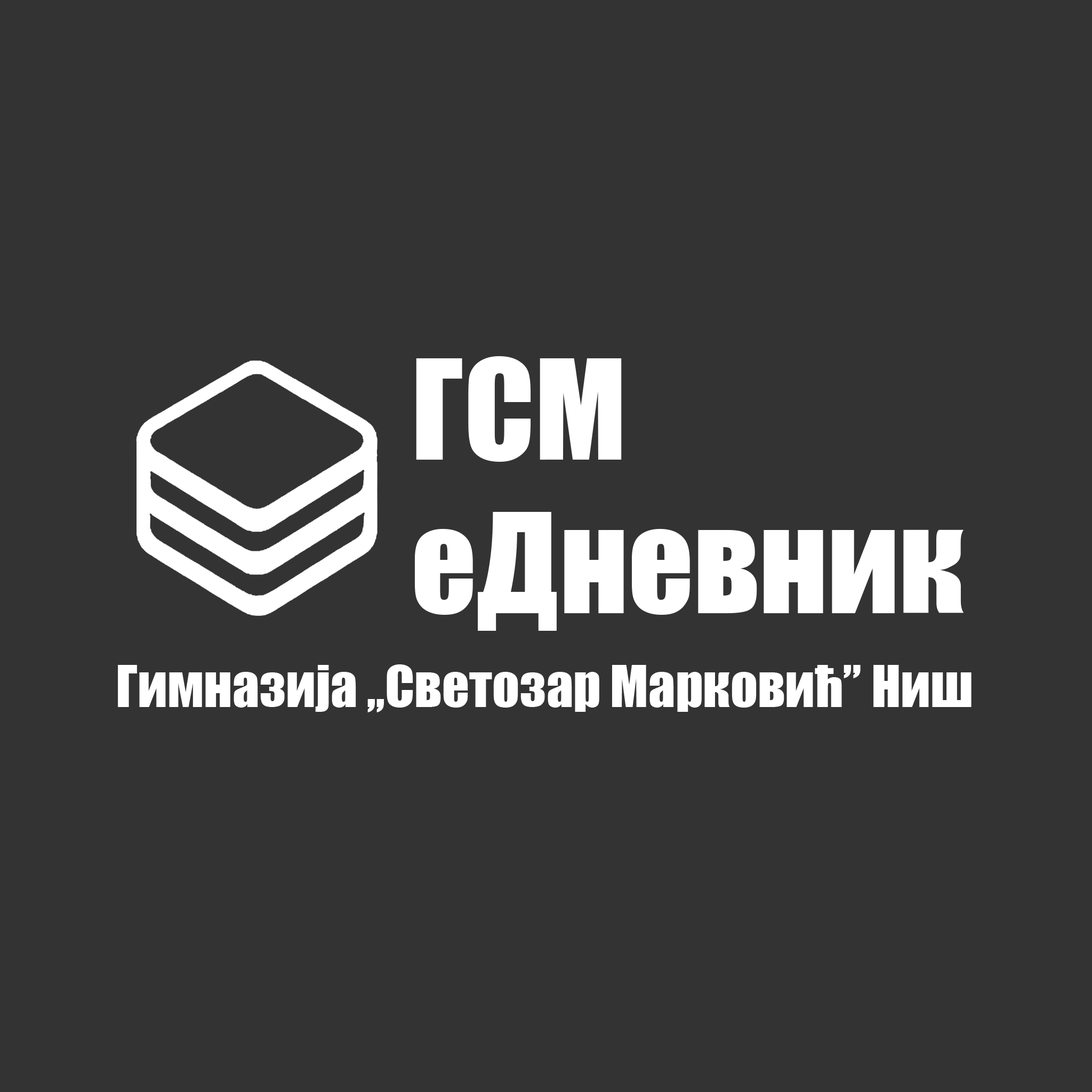
<style>
.page{position:relative;width:1092px;height:1092px;background:#333333}
.page>*{position:absolute;margin:0}
.t1{font:128px "Impact";color:#ffffff}
.t2{font:53.3px "Impact";color:#ffffff}
</style>
<div class="page">
<p class="t1" style="left:415px;top:356px;width:549px;height:275px">ГСМ<br>еДневник</p>
<p class="t2" style="left:118px;top:664px;width:853px;height:48px">Гимназија ,,Светозар Марковић” Ниш</p>
</div>
